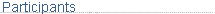
<style>
.page{position:relative;width:215px;height:14px;background:#ffffff}
.page>*{position:absolute;margin:0}
.t1{font:14px "ArialMT";color:#3d6081}
</style>
<div class="page">
<p class="t1" style="left:3px;top:2px;width:72px;height:13px">Participants</p>
</div>
